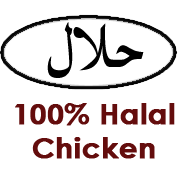
<style>
.page{position:relative;width:180px;height:180px;background:#ffffff}
.page>*{position:absolute;margin:0}
.t1{font:27.8px "CenturyGothic-Bold";color:#640d0d;font-weight:bold;scale:1.05 1}
</style>
<div class="page">
<p class="t1" style="left:15px;top:103px;width:160px;height:56px;text-align:center">100% Halal<br>Chicken</p>
</div>
